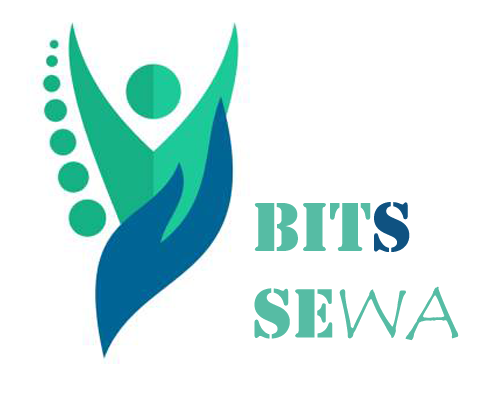
<style>
.page{position:relative;width:500px;height:400px;background:#ffffff}
.page>*{position:absolute;margin:0}
.t1{font:72px "Stencil";color:#56bca4}
.t2{font:72px "Stencil";color:#0f5281}
.t3{font:72px "TempusSansITC";color:#56bca4}
</style>
<div class="page">
<p class="t1" style="left:254px;top:202px;width:205px;height:139px">BIT<span class="t2">S</span> <br>SE<span class="t3">WA</span></p>
</div>
